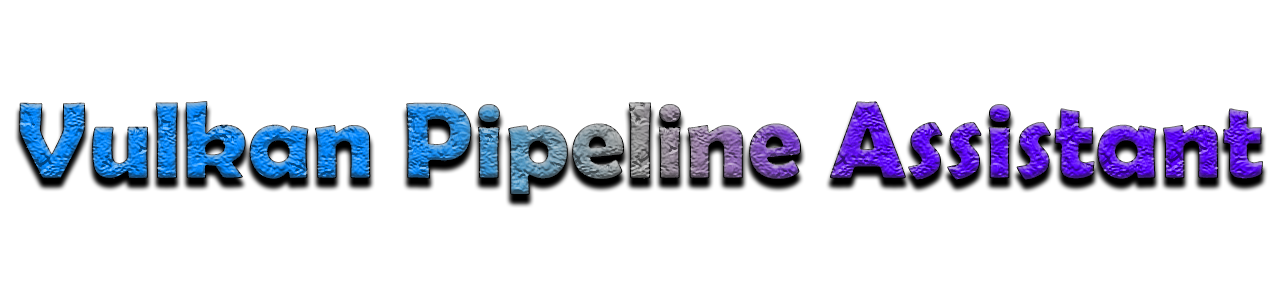
<style>
.page{position:relative;width:1280px;height:286px;background:#ffffff}
.page>*{position:absolute;margin:0}
.t1{font:110px "BerlinSansFBDemi-Bold"}
</style>
<div class="page">
<p class="t1" style="left:19px;top:101px;width:1244px;height:94px">Vulkan Pipeline Assistant</p>
</div>
